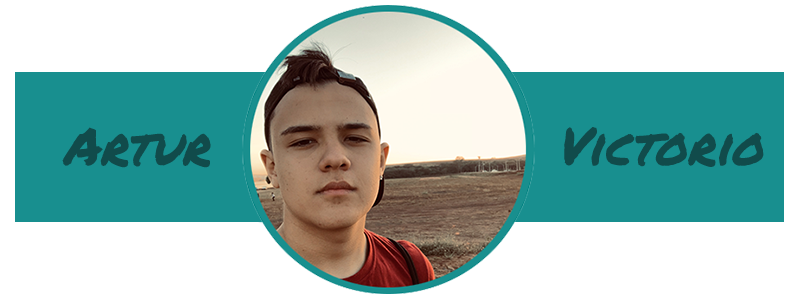
<style>
.page{position:relative;width:807px;height:294px;background:#ffffff}
.page>*{position:absolute;margin:0}
.t1{font:52px "PermanentMarker";color:#114b4b;font-style:italic}
</style>
<div class="page">
<p class="t1" style="left:62px;top:127px;width:149px;height:41px">Artur</p>
<p class="t1" style="left:564px;top:127px;width:200px;height:40px">Victorio</p>
</div>
